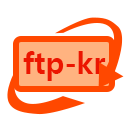
<style>
.page{position:relative;width:128px;height:128px;background:#ffffff}
.page>*{position:absolute;margin:0}
.t1{font:30px "MalgunGothicBold";color:#ec1600}
</style>
<div class="page">
<p class="t1" style="left:23px;top:51px;width:83px;height:30px">ftp-kr</p>
</div>
